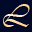
<style>
.page{position:relative;width:32px;height:32px;background:#01092b}
.page>*{position:absolute;margin:0}
.t1{font:32.7px "Vivaldii";letter-spacing:0.06em;scale:0.94 1}
</style>
<div class="page">
<p class="t1" style="left:3px;top:4px;width:27px;height:23px">L</p>
</div>
